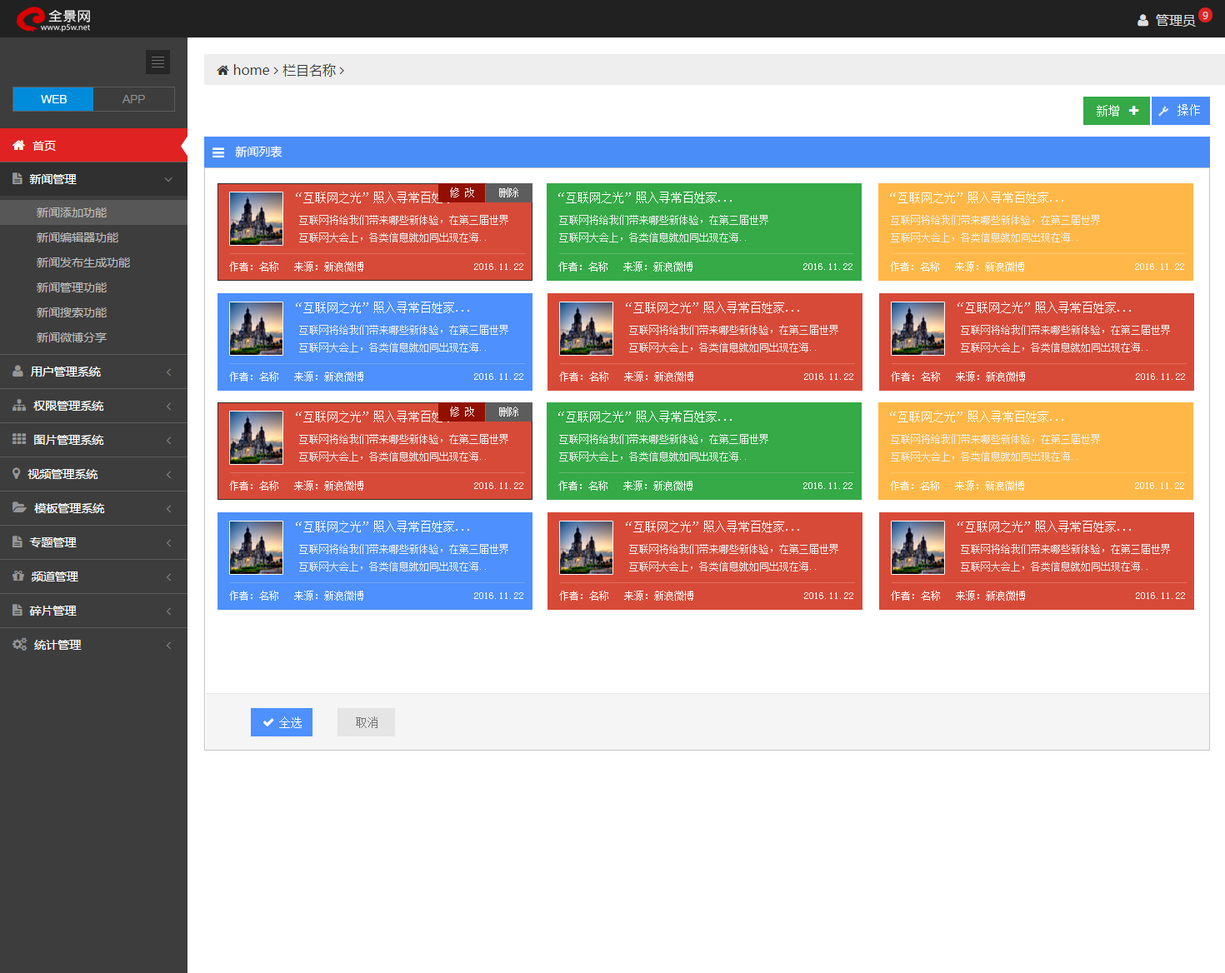
<style>
.page{position:relative;width:1225px;height:973px;background:#ffffff}
.page>*{position:absolute;margin:0}
.t1{font:11.7px "SimSun";color:#ffffff}
.t2{font:11.7px "MicrosoftYaHei";color:#ffffff}
.t3{font:10px "SimSun";color:#ffffff}
.t4{font:10px "SimSun";color:#efefef}
.t5{font:11.7px "SimSun";color:#737373}
</style>
<div class="page">
<p class="t1" style="left:1097px;top:105px;width:22px;height:12px">新增</p>
<p class="t1" style="left:1178px;top:104px;width:22px;height:12px">操作</p>
<p class="t2" style="left:235px;top:146px;width:48px;height:12px">新闻列表</p>
<p class="t1" style="left:296px;top:192px;width:173px;height:11px">“互联网之光”照入寻常百姓家...</p>
<p class="t3" style="left:450px;top:188px;width:24px;height:10px">修 改</p>
<p class="t3" style="left:499px;top:188px;width:19px;height:10px">删除</p>
<p class="t1" style="left:558px;top:192px;width:174px;height:11px">“互联网之光”照入寻常百姓家...</p>
<p class="t1" style="left:890px;top:192px;width:173px;height:11px">“互联网之光”照入寻常百姓家...</p>
<p class="t4" style="left:299px;top:215px;width:209px;height:28px">互联网将给我们带来哪些新体验，在第三届世界<br>互联网大会上，各类信息就如同出现在海..</p>
<p class="t4" style="left:559px;top:215px;width:209px;height:28px">互联网将给我们带来哪些新体验，在第三届世界<br>互联网大会上，各类信息就如同出现在海..</p>
<p class="t4" style="left:891px;top:215px;width:209px;height:28px">互联网将给我们带来哪些新体验，在第三届世界<br>互联网大会上，各类信息就如同出现在海..</p>
<p class="t3" style="left:229px;top:262px;width:294px;height:10px">作者：名称   来源：新浪微博                      2016.11.22</p>
<p class="t3" style="left:558px;top:262px;width:295px;height:10px">作者：名称   来源：新浪微博                      2016.11.22</p>
<p class="t3" style="left:890px;top:262px;width:294px;height:10px">作者：名称   来源：新浪微博                      2016.11.22</p>
<p class="t1" style="left:296px;top:302px;width:173px;height:11px">“互联网之光”照入寻常百姓家...</p>
<p class="t1" style="left:626px;top:302px;width:173px;height:11px">“互联网之光”照入寻常百姓家...</p>
<p class="t1" style="left:958px;top:302px;width:173px;height:11px">“互联网之光”照入寻常百姓家...</p>
<p class="t4" style="left:299px;top:325px;width:209px;height:28px">互联网将给我们带来哪些新体验，在第三届世界<br>互联网大会上，各类信息就如同出现在海..</p>
<p class="t4" style="left:629px;top:325px;width:209px;height:28px">互联网将给我们带来哪些新体验，在第三届世界<br>互联网大会上，各类信息就如同出现在海..</p>
<p class="t4" style="left:961px;top:325px;width:209px;height:28px">互联网将给我们带来哪些新体验，在第三届世界<br>互联网大会上，各类信息就如同出现在海..</p>
<p class="t3" style="left:229px;top:372px;width:294px;height:10px">作者：名称   来源：新浪微博                      2016.11.22</p>
<p class="t3" style="left:559px;top:372px;width:294px;height:10px">作者：名称   来源：新浪微博                      2016.11.22</p>
<p class="t3" style="left:891px;top:372px;width:294px;height:10px">作者：名称   来源：新浪微博                      2016.11.22</p>
<p class="t1" style="left:296px;top:411px;width:173px;height:12px">“互联网之光”照入寻常百姓家...</p>
<p class="t3" style="left:450px;top:407px;width:24px;height:10px">修 改</p>
<p class="t3" style="left:499px;top:407px;width:19px;height:10px">删除</p>
<p class="t1" style="left:558px;top:411px;width:174px;height:12px">“互联网之光”照入寻常百姓家...</p>
<p class="t1" style="left:890px;top:411px;width:173px;height:12px">“互联网之光”照入寻常百姓家...</p>
<p class="t4" style="left:299px;top:434px;width:209px;height:28px">互联网将给我们带来哪些新体验，在第三届世界<br>互联网大会上，各类信息就如同出现在海..</p>
<p class="t4" style="left:559px;top:434px;width:209px;height:28px">互联网将给我们带来哪些新体验，在第三届世界<br>互联网大会上，各类信息就如同出现在海..</p>
<p class="t4" style="left:891px;top:434px;width:209px;height:28px">互联网将给我们带来哪些新体验，在第三届世界<br>互联网大会上，各类信息就如同出现在海..</p>
<p class="t3" style="left:229px;top:481px;width:294px;height:10px">作者：名称   来源：新浪微博                      2016.11.22</p>
<p class="t3" style="left:558px;top:481px;width:295px;height:10px">作者：名称   来源：新浪微博                      2016.11.22</p>
<p class="t3" style="left:890px;top:481px;width:294px;height:10px">作者：名称   来源：新浪微博                      2016.11.22</p>
<p class="t1" style="left:296px;top:521px;width:173px;height:12px">“互联网之光”照入寻常百姓家...</p>
<p class="t1" style="left:626px;top:521px;width:173px;height:12px">“互联网之光”照入寻常百姓家...</p>
<p class="t1" style="left:958px;top:521px;width:173px;height:12px">“互联网之光”照入寻常百姓家...</p>
<p class="t4" style="left:299px;top:544px;width:209px;height:28px">互联网将给我们带来哪些新体验，在第三届世界<br>互联网大会上，各类信息就如同出现在海..</p>
<p class="t4" style="left:629px;top:544px;width:209px;height:28px">互联网将给我们带来哪些新体验，在第三届世界<br>互联网大会上，各类信息就如同出现在海..</p>
<p class="t4" style="left:961px;top:544px;width:209px;height:28px">互联网将给我们带来哪些新体验，在第三届世界<br>互联网大会上，各类信息就如同出现在海..</p>
<p class="t3" style="left:229px;top:591px;width:294px;height:10px">作者：名称   来源：新浪微博                      2016.11.22</p>
<p class="t3" style="left:559px;top:591px;width:294px;height:10px">作者：名称   来源：新浪微博                      2016.11.22</p>
<p class="t3" style="left:891px;top:591px;width:294px;height:10px">作者：名称   来源：新浪微博                      2016.11.22</p>
<p class="t1" style="left:279px;top:717px;width:23px;height:11px">全选</p>
<p class="t5" style="left:356px;top:717px;width:22px;height:11px">取消</p>
</div>
